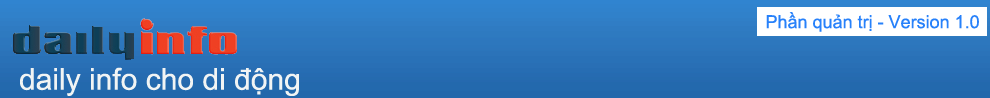
<style>
.page{position:relative;width:990px;height:98px}
.page>*{position:absolute;margin:0}
.t1{font:18px "ArialMT";color:#2781fa}
.t2{font:30px "ArialMT";color:#f1f4f4}
</style>
<div class="page">
<p class="t1" style="left:766px;top:12px;width:213px;height:20px">Phần quản trị - Version 1.0</p>
<p class="t2" style="left:20px;top:67px;width:279px;height:29px">daily info cho di động</p>
</div>
